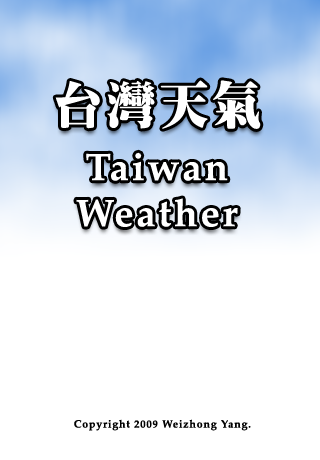
<style>
.page{position:relative;width:320px;height:460px;background:#ffffff}
.page>*{position:absolute;margin:0}
.t1{font:49.4px "ARMingB5-Ultra";letter-spacing:0.075em;color:#ffffff}
.t2{font:38.4px "Palatino-Bold";letter-spacing:0.075em;color:#ffffff}
.t3{font:10.7px "Palatino-Bold";letter-spacing:0.075em;color:#000000}
</style>
<div class="page">
<p class="t1" style="left:55px;top:80px;width:206px;height:49px">台灣天氣</p>
<p class="t2" style="left:76px;top:152px;width:162px;height:75px;text-align:center">Taiwan<br>Weather</p>
<p class="t3" style="left:74px;top:419px;width:177px;height:12px">Copyright 2009 Weizhong Yang.</p>
</div>
